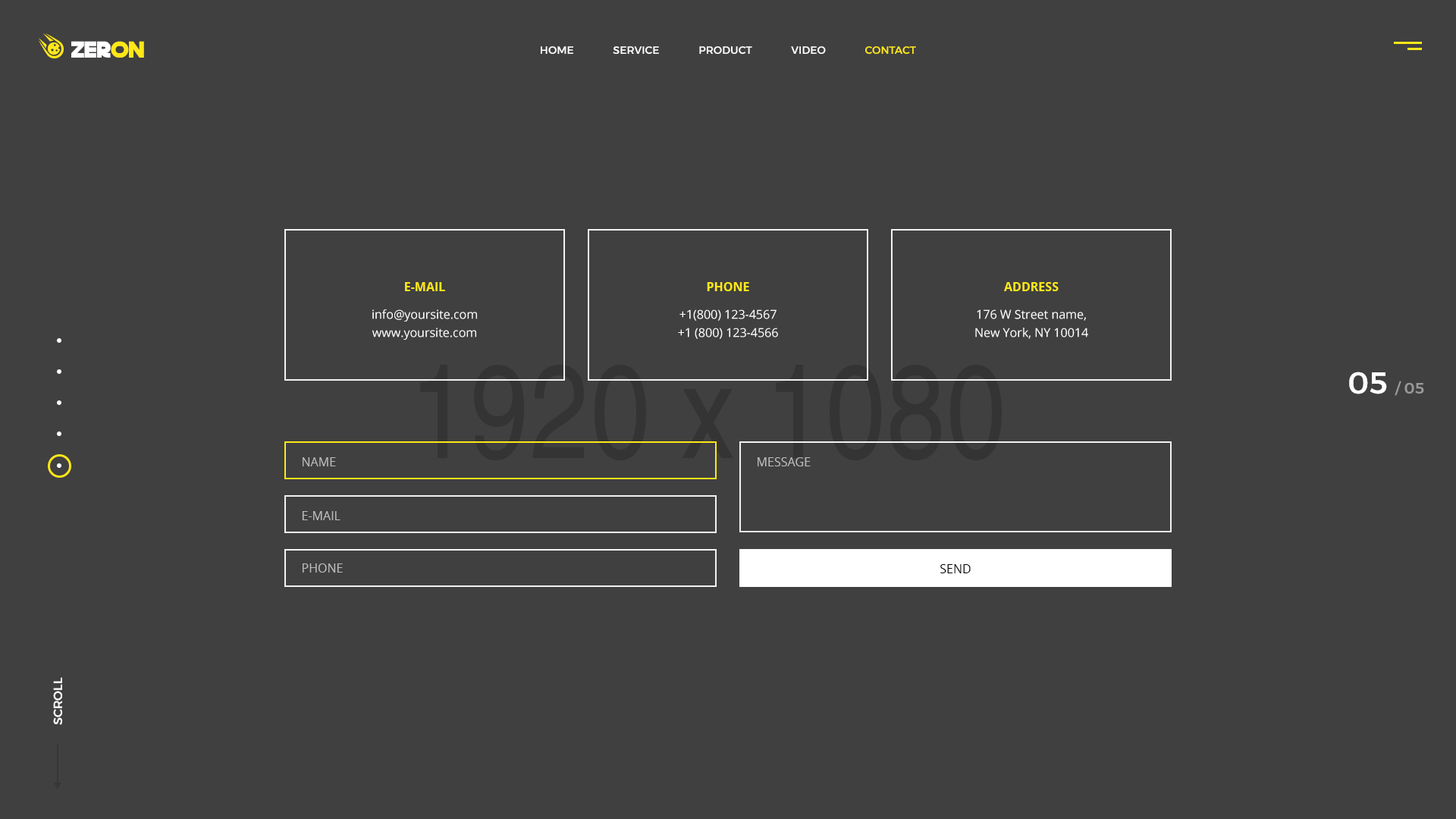
<style>
.page{position:relative;width:1456px;height:819px;background:#404040}
.page>*{position:absolute;margin:0}
.t1{font:22.7px "DeathStar";letter-spacing:0.001em;color:#ffffff}
.t2{font:22.7px "DeathStar";letter-spacing:0.001em;color:#ffe718}
.t3{font:10.6px "Montserrat-Medium";letter-spacing:0.001em;color:#ffffff}
.t4{font:10.6px "Montserrat-Medium";letter-spacing:0.001em;color:#ffe718}
.t5{font:12.1px "OpenSans-Bold";color:#ffe718;text-transform:uppercase}
.t6{font:12.1px/18.2px "OpenSans";color:#ffffff}
.t7{font:15.2px "Montserrat-Medium";letter-spacing:0.001em;color:#9a9a9a}
.t8{font:30.3px "Montserrat-Medium";letter-spacing:0.001em;color:#ffffff}
.t9{font:12.1px "OpenSans";color:#bcbcbc;text-transform:uppercase}
.t10{font:12.1px "OpenSans";color:#000000;text-transform:uppercase}
.t11{font:12.1px "Montserrat-Medium";letter-spacing:0.001em;color:#ffffff}
</style>
<div class="page">
<p class="t1" style="left:71px;top:41px;width:73px;height:17px">zer<span class="t2">on</span></p>
<p class="t3" style="left:541px;top:46px;width:375px;height:9px">HOME               SERVICE               PRODUCT               VIDEO               <span class="t4">CONTACT</span></p>
<p class="t5" style="left:405px;top:282px;width:40px;height:9px">E-MAIL</p>
<p class="t5" style="left:707px;top:282px;width:42px;height:9px">phone</p>
<p class="t5" style="left:1004px;top:282px;width:55px;height:9px">address</p>
<p class="t6" style="left:372px;top:309px;width:105px;height:31px;text-align:center">info@yoursite.com<br>www.yoursite.com</p>
<p class="t6" style="left:678px;top:309px;width:100px;height:30px;text-align:center">+1(800) 123-4567<br>+1 (800) 123-4566</p>
<p class="t6" style="left:975px;top:309px;width:113px;height:30px;text-align:center">176 W Street name,<br>New York, NY 10014</p>
<p class="t7" style="left:1349px;top:372px;width:75px;height:24px"><span class="t8">05 </span>/ 05</p>
<p class="t9" style="left:303px;top:457px;width:33px;height:9px">name</p>
<p class="t9" style="left:758px;top:457px;width:53px;height:9px">message</p>
<p class="t9" style="left:302px;top:511px;width:38px;height:9px">E-MAIL</p>
<p class="t9" style="left:303px;top:563px;width:40px;height:10px">phone</p>
<p class="t10" style="left:940px;top:564px;width:31px;height:9px">send</p>
<p class="t11" style="left:53px;top:677px;width:10px;height:48px;rotate:-90deg">SCROLL</p>
</div>
